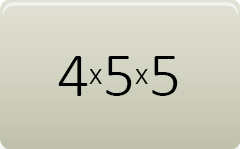
<style>
.page{position:relative;width:240px;height:149px}
.page>*{position:absolute;margin:0}
.t1{font:64px "Calibri-Light";color:#000000}
.t2{font:32px "Calibri-Light";color:#000000}
</style>
<div class="page">
<p class="t1" style="left:58px;top:56px;width:120px;height:40px">4<span class="t2">x</span>5<span class="t2">x</span>5</p>
</div>
